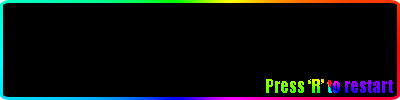
<style>
.page{position:relative;width:400px;height:100px;background:#000000}
.page>*{position:absolute;margin:0}
.t1{font:18px "Impact"}
</style>
<div class="page">
<p class="t1" style="left:266px;top:79px;width:127px;height:14px">Press ‘R’ to restart</p>
</div>
